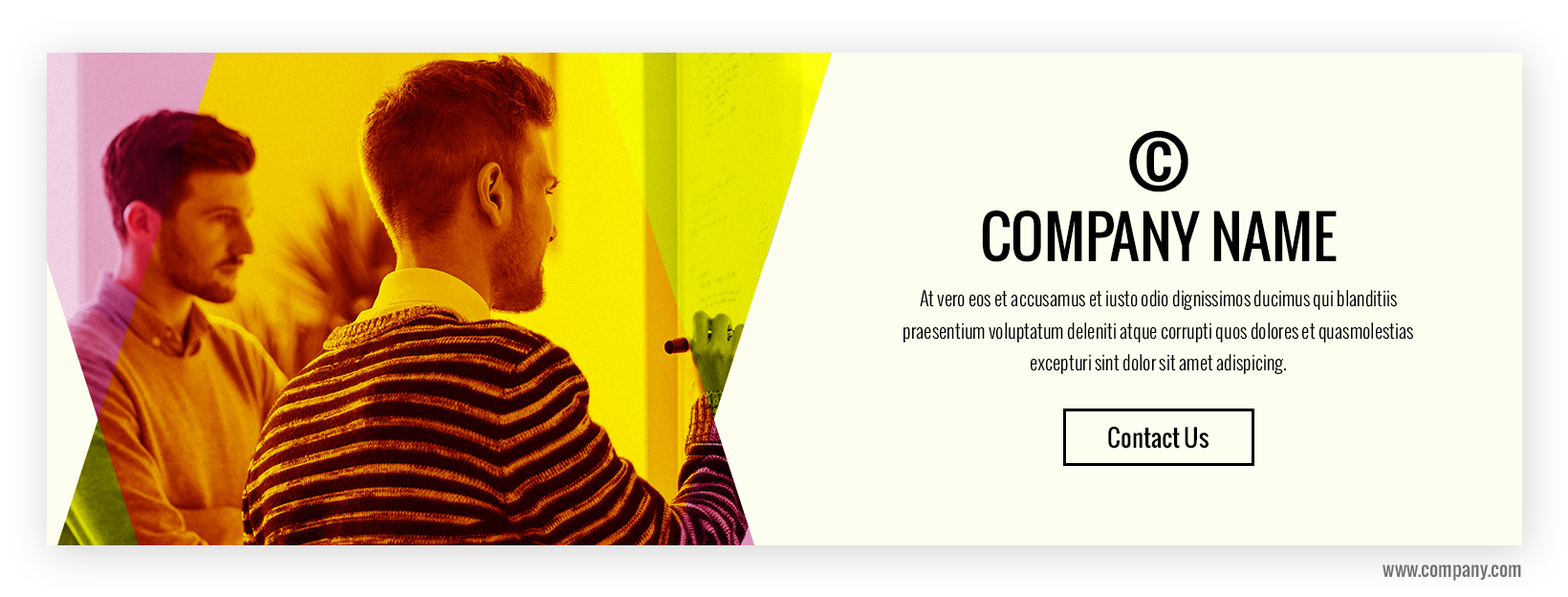
<style>
.page{position:relative;width:1568px;height:597px;background:#fefef0}
.page>*{position:absolute;margin:0}
.t1{font:87.6px "Oswald";color:#000000}
.t2{font:57.4px "Oswald";color:#000000;text-transform:uppercase}
.t3{font:19.1px/31.7px "Oswald-Light";color:#000000}
.t4{font:23.9px "Oswald";color:#000000}
.t5{font:19.1px "Oswald";color:#707070}
</style>
<div class="page">
<p class="t1" style="left:1129px;top:130px;width:59px;height:62px">©</p>
<p class="t2" style="left:982px;top:210px;width:355px;height:52px">Company Name</p>
<p class="t3" style="left:904px;top:290px;width:509px;height:84px;text-align:center">At vero eos et accusamus et iusto odio dignissimos ducimus qui blanditiis praesentium voluptatum deleniti atque corrupti quos dolores et quasmolestias excepturi sint dolor sit amet adispicing.</p>
<p class="t4" style="left:1108px;top:426px;width:101px;height:22px">Contact Us</p>
<p class="t5" style="left:1383px;top:564px;width:138px;height:16px">www.company.com</p>
</div>
